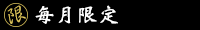
<style>
.page{position:relative;width:200px;height:30px;background:#000000}
.page>*{position:absolute;margin:0}
.t1{font:20.8px "HerSin-Medium";letter-spacing:0.025em;color:#dfc65c}
.t2{font:20.8px "Weibei-TC-Bold";letter-spacing:0.025em;color:#ffffff}
</style>
<div class="page">
<p class="t1" style="left:7px;top:5px;width:19px;height:19px;rotate:-15deg">限</p>
<p class="t2" style="left:35px;top:5px;width:83px;height:19px">每月限定</p>
</div>
